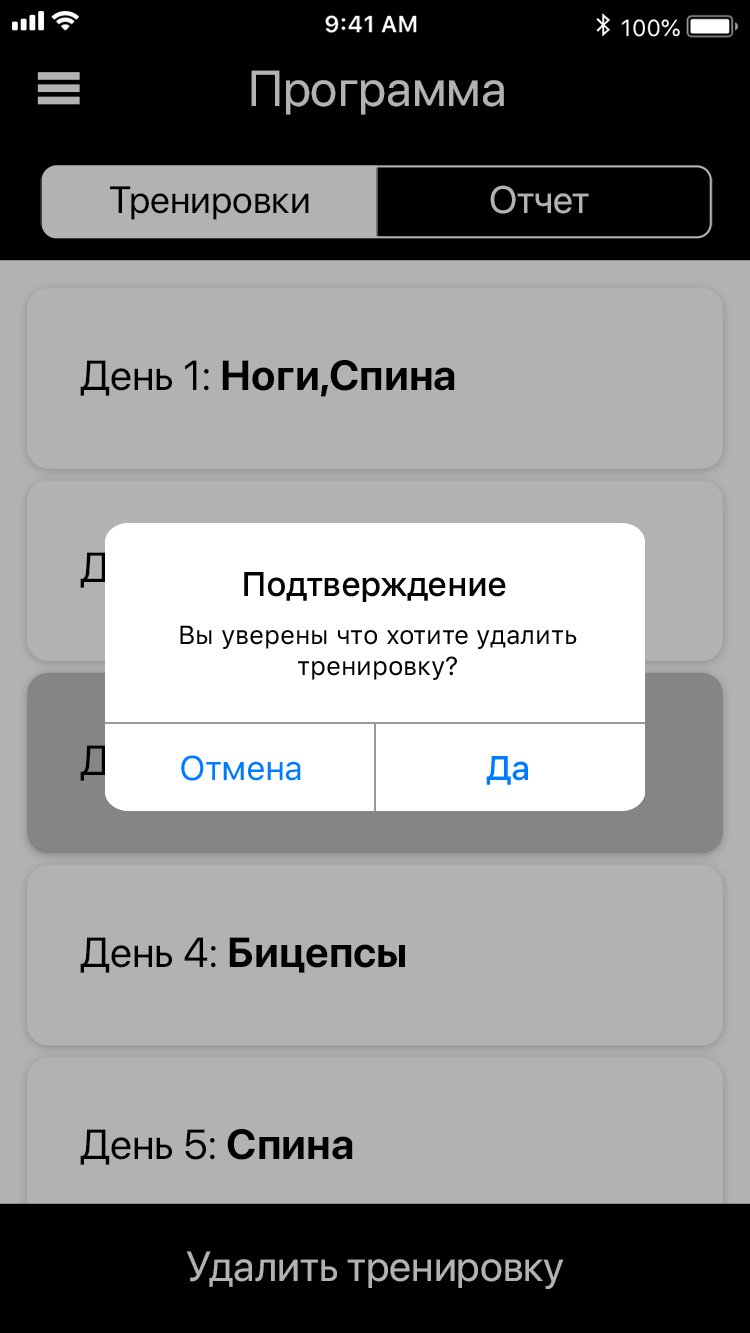
<style>
.page{position:relative;width:750px;height:1333px;background:#b2b2b2}
.page>*{position:absolute;margin:0}
.t1{font:50px "SFProDisplay-Regular";color:#b2b2b2}
.t2{font:38px "SFProDisplay-Regular";color:#b2b2b2}
.t3{font:38px "SFProDisplay-Regular";color:#000000}
.t4{font:42px "SFProDisplay-Bold";color:#000000}
.t5{font:42px "SFProDisplay-Regular";color:#000000}
.t6{font:34px "SFProText-Medium";letter-spacing:-0.024em;color:#030303}
.t7{font:26px "SFProText-Regular";letter-spacing:-0.006em;color:#030303}
.t8{font:34px "SFProText-Regular";letter-spacing:-0.024em;color:#007aff}
.t9{font:34px "SFProText-Medium";letter-spacing:-0.024em;color:#007aff}
.t10{font:42px "SFProDisplay-Regular";color:#b2b2b2}
</style>
<div class="page">
<p class="t1" style="left:251px;top:70px;width:253px;height:45px">Программа</p>
<p class="t2" style="left:490px;top:185px;width:99px;height:29px">Отчет</p>
<p class="t3" style="left:110px;top:186px;width:199px;height:34px">Тренировки</p>
<p class="t4" style="left:80px;top:360px;width:375px;height:37px"><span class="t5">День 1: </span>Ноги,Спина</p>
<p class="t6" style="left:244px;top:572px;width:262px;height:30px">Подтверждение</p>
<p class="t7" style="left:180px;top:625px;width:397px;height:55px;text-align:center">Вы уверены что хотите удалить<br>тренировку?</p>
<p class="t8" style="left:181px;top:755px;width:120px;height:26px">Отмена</p>
<p class="t9" style="left:486px;top:756px;width:42px;height:29px">Да</p>
<p class="t5" style="left:80px;top:937px;width:325px;height:36px">День 4: <span class="t4">Бицепсы</span></p>
<p class="t5" style="left:80px;top:1129px;width:273px;height:36px">День 5: <span class="t4">Спина</span></p>
<p class="t10" style="left:186px;top:1251px;width:378px;height:38px">Удалить тренировку</p>
</div>
